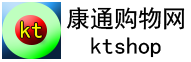
<style>
.page{position:relative;width:191px;height:62px;background:#ffffff}
.page>*{position:absolute;margin:0}
.t1{font:24px "SimHei";color:#000000}
.t2{font:24px "SimHei";color:#fbf802}
</style>
<div class="page">
<p class="t1" style="left:66px;top:7px;width:119px;height:23px">康通购物网</p>
<p class="t2" style="left:20px;top:21px;width:22px;height:17px">kt</p>
<p class="t1" style="left:91px;top:37px;width:70px;height:21px">ktshop</p>
</div>
